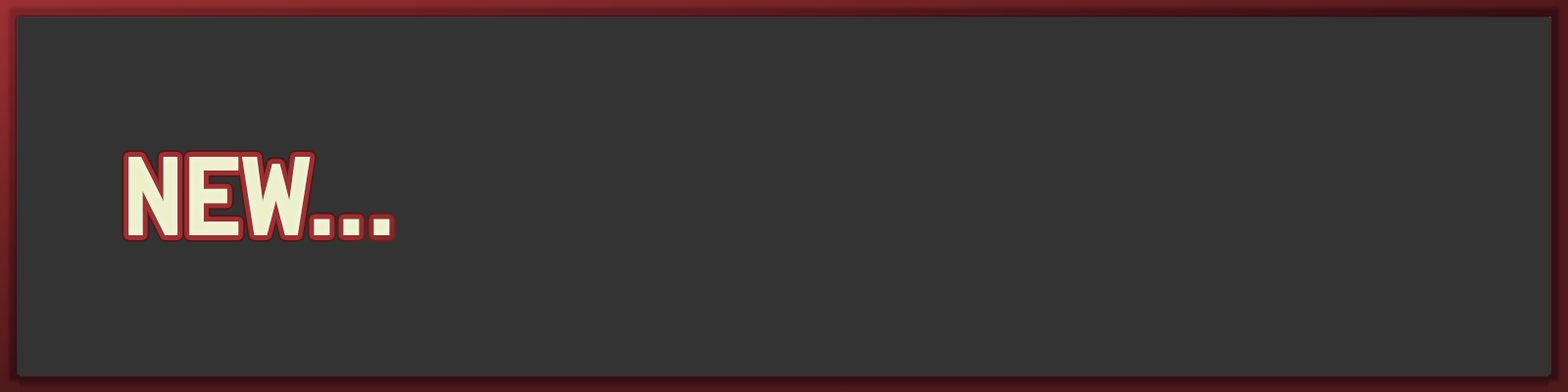
<style>
.page{position:relative;width:1568px;height:392px;background:#333333}
.page>*{position:absolute;margin:0}
.t1{font:122.5px "Bombardier";color:#ecefca}
</style>
<div class="page">
<p class="t1" style="left:128px;top:157px;width:262px;height:78px">NEW...</p>
</div>
